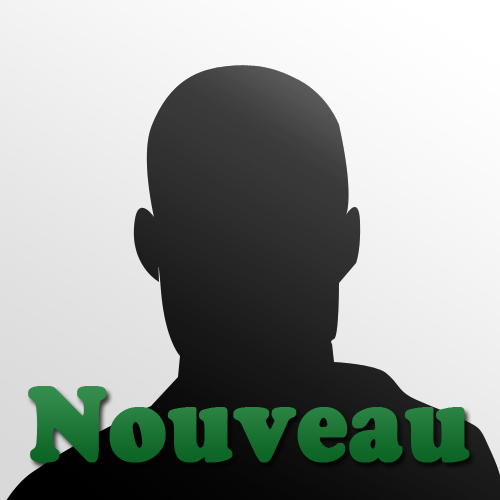
<style>
.page{position:relative;width:500px;height:500px}
.page>*{position:absolute;margin:0}
.t1{font:110px "CooperBlack";color:#0e782c;font-weight:bold;scale:0.86 1}
</style>
<div class="page">
<p class="t1" style="left:28px;top:386px;width:442px;height:77px">Nouveau</p>
</div>
